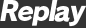
<style>
.page{position:relative;width:86px;height:28px;background:#333333}
.page>*{position:absolute;margin:0}
.t1{font:26.7px "RodinPro-EB";letter-spacing:-0.067em;color:#ffffff;font-style:italic}
</style>
<div class="page">
<p class="t1" style="left:0px;top:0px;width:86px;height:27px">Replay</p>
</div>
